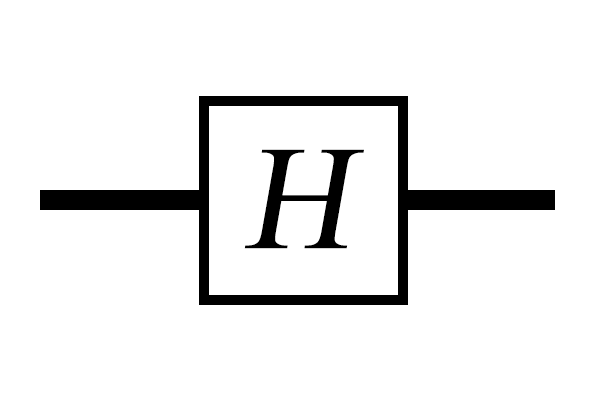
<style>
.page{position:relative;width:600px;height:400px;background:#ffffff}
.page>*{position:absolute;margin:0}
.t1{font:148.5px "TimesNewRomanPSMT";color:#000000;font-style:italic}
</style>
<div class="page">
<p class="t1" style="left:244px;top:149px;width:120px;height:100px">H</p>
</div>
